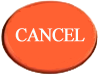
<style>
.page{position:relative;width:98px;height:75px;background:#ff6132}
.page>*{position:absolute;margin:0}
.t1{font:18.5px "TimesNewRomanPSMT";letter-spacing:-0.025em;color:#f9fcfb;font-weight:bold}
</style>
<div class="page">
<p class="t1" style="left:15px;top:28px;width:70px;height:14px">CANCEL</p>
</div>
